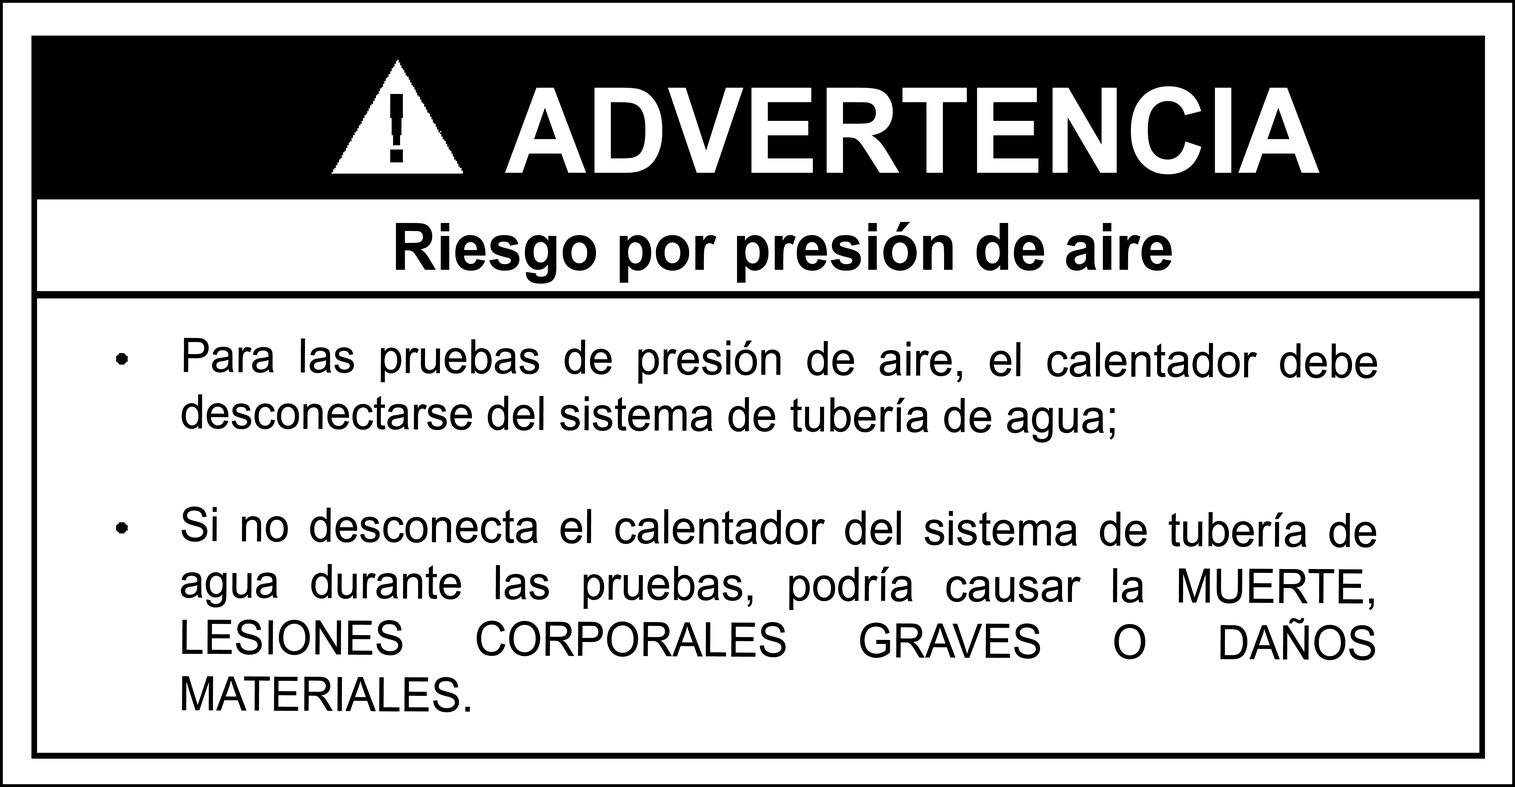
<style>
.page{position:relative;width:1515px;height:787px;background:#ffffff}
.page>*{position:absolute;margin:0}
.t1{font:118.8px "Arial-BoldMT";color:#ffffff;scale:0.95 1}
.t2{font:65.3px "Arial-BoldMT";color:#000000;scale:0.95 1}
.t3{font:47.5px/56.4px "ArialMT";color:#000000;scale:0.95 1}
</style>
<div class="page">
<p class="t1" style="left:505px;top:86px;width:814px;height:88px">ADVERTENCIA</p>
<p class="t2" style="left:396px;top:222px;width:776px;height:62px">Riesgo por presión de aire</p>
<p class="t3" style="left:181px;top:338px;width:1196px;height:375px;text-align:justify">Para las pruebas de presión de aire, el calentador debe desconectarse del sistema de tubería de agua;<br><br>Si no desconecta el calentador del sistema de tubería de agua durante las pruebas, podría causar la MUERTE, LESIONES CORPORALES GRAVES O DAÑOS MATERIALES.</p>
</div>
